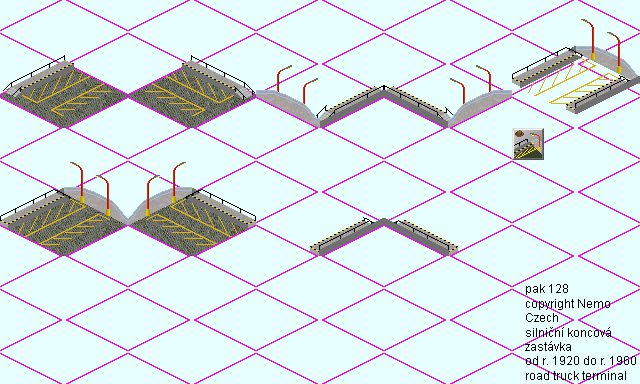
<style>
.page{position:relative;width:640px;height:384px;background:#e7ffff}
.page>*{position:absolute;margin:0}
.t1{font:12px "ArialMT";color:#000000}
</style>
<div class="page">
<p class="t1" style="left:525px;top:284px;width:111px;height:96px">pak 128<br>copyright Nemo<br>Czech<br>silniční koncová<br>zastávka<br>od r. 1920 do r. 1960<br>road truck terminal</p>
</div>
